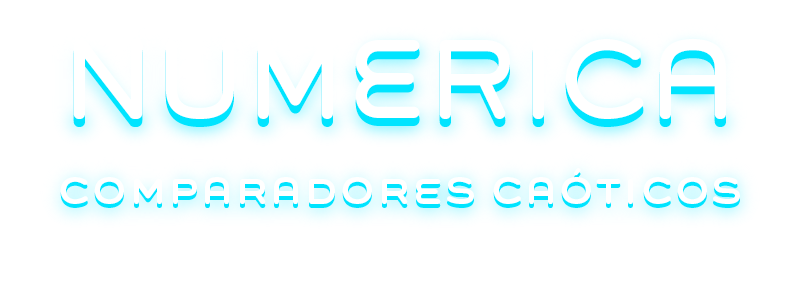
<style>
.page{position:relative;width:800px;height:300px;background:#ffffff}
.page>*{position:absolute;margin:0}
.t1{font:100px "GroverCaps"}
.t2{font:47px "GroverCaps"}
</style>
<div class="page">
<p class="t1" style="left:73px;top:47px;width:653px;height:80px">NUMERICA</p>
<p class="t2" style="left:60px;top:172px;width:680px;height:36px">comparadores caóticos</p>
</div>
